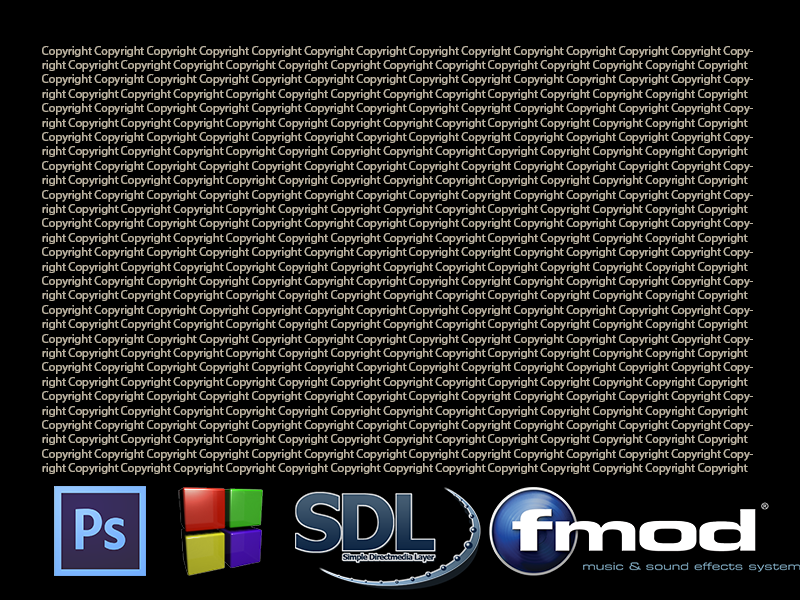
<style>
.page{position:relative;width:800px;height:600px;background:#000000}
.page>*{position:absolute;margin:0}
.t1{font:12px "MyriadPro-Regular";color:#bdb3a0}
</style>
<div class="page">
<p class="t1" style="left:42px;top:46px;width:711px;height:429px">Copyright Copyright Copyright Copyright Copyright Copyright Copyright Copyright Copyright Copyright Copyright Copyright Copyright Copyright Copyright Copyright Copyright Copyright Copyright Copyright Copyright Copyright Copyright Copyright Copyright Copyright Copyright Copyright Copyright Copyright Copyright Copyright Copyright Copyright Copyright Copyright Copyright Copyright Copyright Copyright Copyright Copyright Copyright Copyright Copyright Copyright Copyright Copyright Copyright Copyright Copyright Copyright Copyright Copyright Copyright Copyright Copyright Copyright Copyright Copyright Copyright Copyright Copyright Copyright Copyright Copyright Copyright Copyright Copyright Copyright Copyright Copyright Copyright Copyright Copyright Copyright Copyright Copyright Copyright Copyright Copyright Copyright Copyright Copyright Copyright Copyright Copyright Copyright Copyright Copyright Copyright Copyright Copyright Copyright Copyright Copyright Copyright Copyright Copyright Copyright Copyright Copyright Copyright Copyright Copyright Copyright Copyright Copyright Copyright Copyright Copyright Copyright Copyright Copyright Copyright Copyright Copyright Copyright Copyright Copyright Copyright Copyright Copyright Copyright Copyright Copyright Copyright Copyright Copyright Copyright Copyright Copyright Copyright Copyright Copyright Copyright Copyright Copyright Copyright Copyright Copyright Copyright Copyright Copyright Copyright Copyright Copyright Copyright Copyright Copyright Copyright Copyright Copyright Copyright Copyright Copyright Copyright Copyright Copyright Copyright Copyright Copyright Copyright Copyright Copyright Copyright Copyright Copyright Copyright Copyright Copyright Copyright Copyright Copyright Copyright Copyright Copyright Copyright Copyright Copyright Copyright Copyright Copyright Copyright Copyright Copyright Copyright Copyright Copyright Copyright Copyright Copyright Copyright Copyright Copyright Copyright Copyright Copyright Copyright Copyright Copyright Copyright Copyright Copyright Copyright Copyright Copyright Copyright Copyright Copyright Copyright Copyright Copyright Copyright Copyright Copyright Copyright Copyright Copyright Copyright Copyright Copyright Copyright Copyright Copyright Copyright Copyright Copyright Copyright Copyright Copyright Copyright Copyright Copyright Copyright Copyright Copyright Copyright Copyright Copyright Copyright Copyright Copyright Copyright Copyright Copyright Copyright Copyright Copyright Copyright Copyright Copyright Copyright Copyright Copyright Copyright Copyright Copyright Copyright Copyright Copyright Copyright Copyright Copyright Copyright Copyright Copyright Copyright Copyright Copyright Copyright Copyright Copyright Copyright Copyright Copyright Copyright Copyright Copyright Copyright Copyright Copyright Copyright Copyright Copyright Copyright Copyright Copyright Copyright Copyright Copyright Copyright Copyright Copyright Copyright Copyright Copyright Copyright Copyright Copyright Copyright Copyright Copyright Copyright Copyright Copyright Copyright Copyright Copyright Copyright Copyright Copyright Copyright Copyright Copyright Copyright Copyright Copyright Copyright Copyright Copyright Copyright Copyright Copyright Copyright Copyright Copyright Copyright Copyright Copyright Copyright Copyright Copyright Copyright Copyright Copyright Copyright Copyright Copyright Copyright Copyright Copyright Copyright Copyright Copyright Copyright Copyright Copyright Copyright Copyright Copyright Copyright Copyright Copyright Copyright Copyright Copyright Copyright Copyright Copyright Copyright Copyright Copyright Copyright Copyright Copyright Copyright Copyright Copyright Copyright Copyright Copyright Copyright Copyright Copyright Copyright Copyright Copyright Copyright Copyright Copyright Copyright Copyright Copyright Copyright Copyright Copyright Copyright Copyright Copyright Copyright Copyright Copyright Copyright Copyright Copyright Copyright Copyright Copyright Copyright Copyright Copyright Copyright Copyright Copyright Copyright Copyright Copyright Copyright Copyright Copyright Copyright Copyright Copyright Copyright Copyright Copyright Copyright Copyright Copyright Copyright Copyright Copyright Copyright Copyright Copyright Copyright Copyright Copyright Copyright Copyright Copyright Copyright Copyright Copyright Copyright Copyright Copyright Copyright Copyright Copyright Copyright Copyright Copyright Copyright Copyright Copyright Copyright Copyright Copyright Copyright Copyright Copyright Copyright Copyright Copyright Copyright Copyright Copyright Copyright Copyright Copyright Copyright Copyright Copyright Copyright Copyright Copyright Copyright Copyright Copyright Copyright Copyright Copyright Copyright Copyright Copyright Copyright Copyright Copyright Copyright Copyright Copyright Copyright Copyright Copyright Copyright Copyright Copyright Copyright Copyright Copyright Copyright Copyright Copyright Copyright Copyright Copyright Copyright Copyright Copyright Copyright Copyright Copyright</p>
</div>
